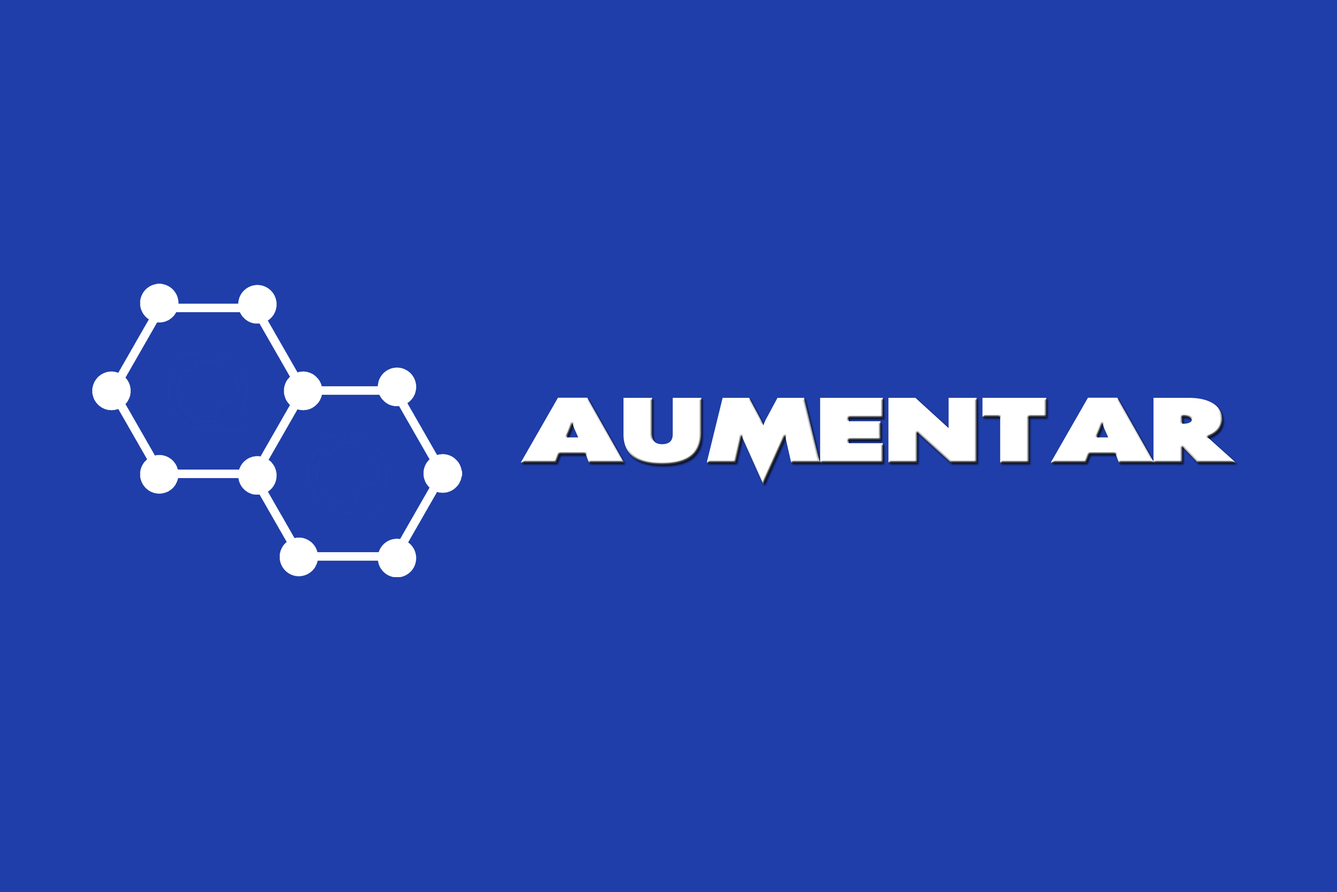
<style>
.page{position:relative;width:1337px;height:892px;background:#1f3ea9}
.page>*{position:absolute;margin:0}
.t1{font:85.3px "ScreamReal";color:#ffffff;font-weight:bold;scale:1.31 1}
</style>
<div class="page">
<p class="t1" style="left:521px;top:397px;width:715px;height:87px">Aumentar</p>
</div>
